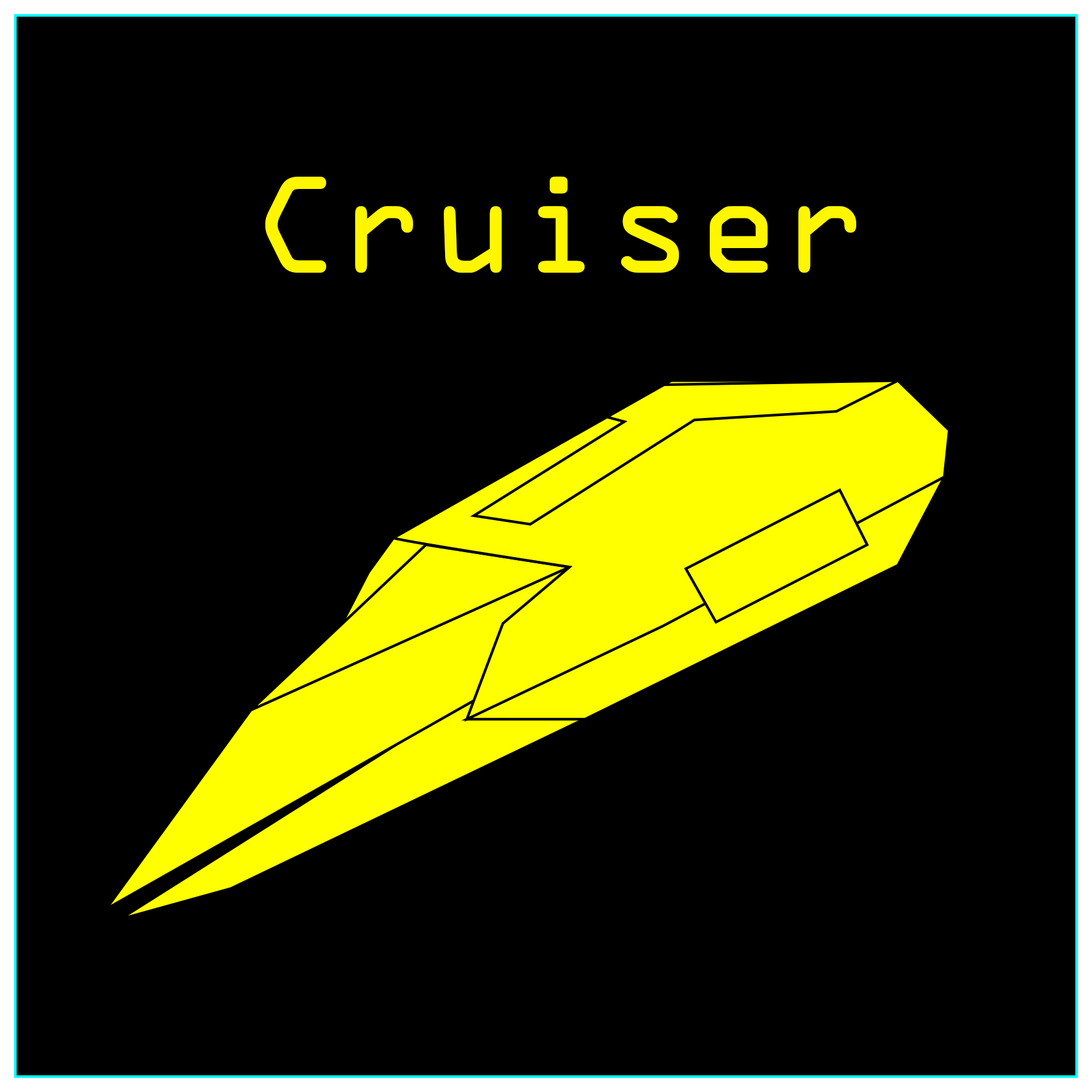
<style>
.page{position:relative;width:1092px;height:1092px;background:#000000}
.page>*{position:absolute;margin:0}
.t1{font:123.1px "OCRAStd";color:#fff600}
</style>
<div class="page">
<p class="t1" style="left:265px;top:176px;width:591px;height:97px">Cruiser</p>
</div>
